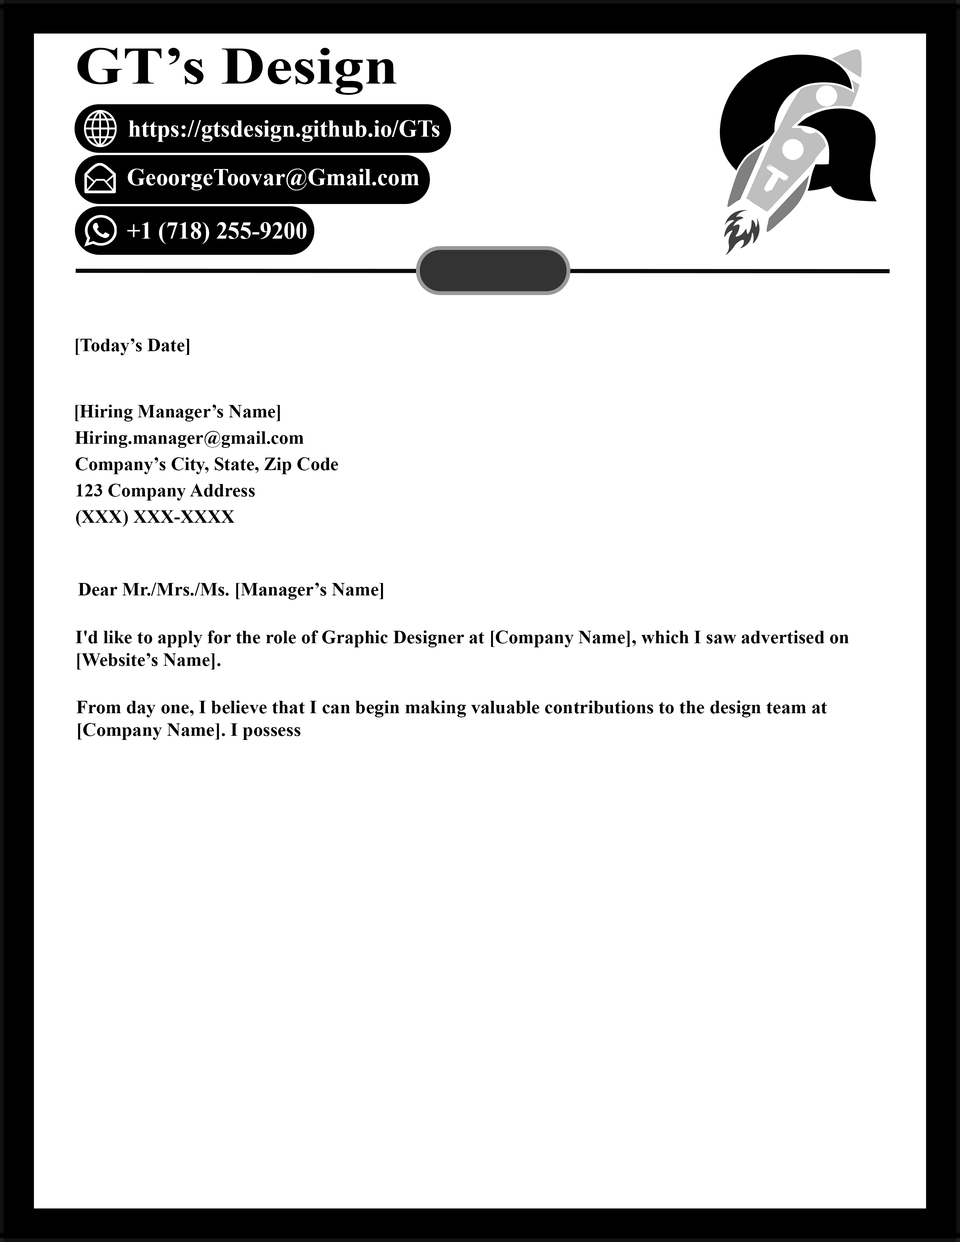
<style>
.page{position:relative;width:960px;height:1242px;background:#ffffff}
.page>*{position:absolute;margin:0}
.t1{font:53.1px "TimesNewRomanPS-BoldMT";color:#000000;scale:1.15 1}
.t2{font:24.2px "TimesNewRomanPS-BoldMT";color:#ffffff}
.t3{font:18.8px "TimesNewRomanPS-BoldMT";color:#000000}
</style>
<div class="page">
<p class="t1" style="left:77px;top:48px;width:319px;height:47px">GT’s Design</p>
<p class="t2" style="left:129px;top:120px;width:311px;height:22px">https://gtsdesign.github.io/GTs</p>
<p class="t2" style="left:128px;top:169px;width:291px;height:21px">GeoorgeToovar@Gmail.com</p>
<p class="t2" style="left:127px;top:222px;width:180px;height:22px">+1 (718) 255-9200</p>
<p class="t3" style="left:76px;top:338px;width:113px;height:17px">[Today’s Date]</p>
<p class="t3" style="left:75px;top:405px;width:205px;height:17px">[Hiring Manager’s Name]</p>
<p class="t3" style="left:75px;top:431px;width:229px;height:17px">Hiring.manager@gmail.com</p>
<p class="t3" style="left:75px;top:457px;width:263px;height:17px">Company’s City, State, Zip Code</p>
<p class="t3" style="left:76px;top:484px;width:179px;height:17px">123 Company Address</p>
<p class="t3" style="left:76px;top:510px;width:159px;height:17px">(XXX) XXX-XXXX</p>
<p class="t3" style="left:78px;top:583px;width:305px;height:17px">Dear Mr./Mrs./Ms. [Manager’s Name]</p>
<p class="t3" style="left:76px;top:631px;width:773px;height:39px">I'd like to apply for the role of Graphic Designer at [Company Name], which I saw advertised on<br>[Website’s Name].</p>
<p class="t3" style="left:76px;top:701px;width:751px;height:39px">From day one, I believe that I can begin making valuable contributions to the design team at<br>[Company Name]. I possess</p>
</div>
